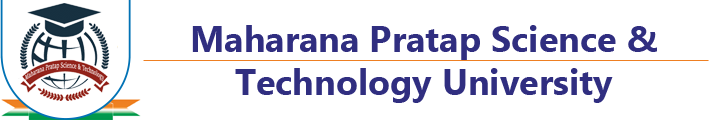
<style>
.page{position:relative;width:720px;height:120px;background:#ffffff}
.page>*{position:absolute;margin:0}
.t1{font:36px "Gadugi-Bold";color:#302e80}
</style>
<div class="page">
<p class="t1" style="left:192px;top:25px;width:465px;height:78px;text-align:center">Maharana Pratap Science &amp; <br>Technology University</p>
</div>
